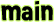
<style>
.page{position:relative;width:54px;height:22px;background:#000000}
.page>*{position:absolute;margin:0}
.t1{font:24px "RixComingsoonB";color:#000000;scale:0.9 1}
</style>
<div class="page">
<p class="t1" style="left:1px;top:1px;width:52px;height:20px">main</p>
</div>
